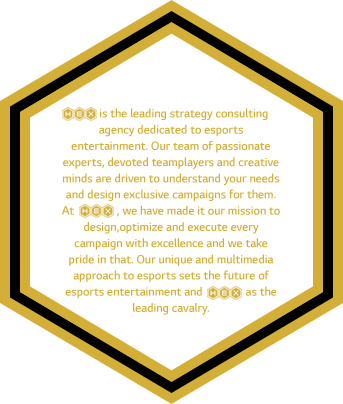
<style>
.page{position:relative;width:343px;height:404px;background:#ffffff}
.page>*{position:absolute;margin:0}
.t1{font:13.5px "LGSmartLight-SemiBold";color:#d4af37}
</style>
<div class="page">
<p class="t1" style="left:61px;top:108px;width:219px;height:207px;text-align:center">is the leading strategy consulting agency dedicated to esports entertainment. Our team of passionate experts, devoted teamplayers and creative minds are driven to understand your needs and design exclusive campaigns for them. At               , we have made it our mission to design,optimize and execute every campaign with excellence and we take pride in that. Our unique and multimedia approach to esports sets the future of esports entertainment and               as the leading cavalry.</p>
</div>
